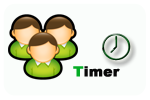
<style>
.page{position:relative;width:150px;height:100px;background:#fafdfb}
.page>*{position:absolute;margin:0}
.t1{font:14px "Arial-Black";color:#080808;font-weight:bold}
.t2{font:14px "Arial-Black";color:#03ab24;font-weight:bold}
</style>
<div class="page">
<p class="t1" style="left:73px;top:66px;width:47px;height:11px"><span class="t2">T</span>imer</p>
</div>
